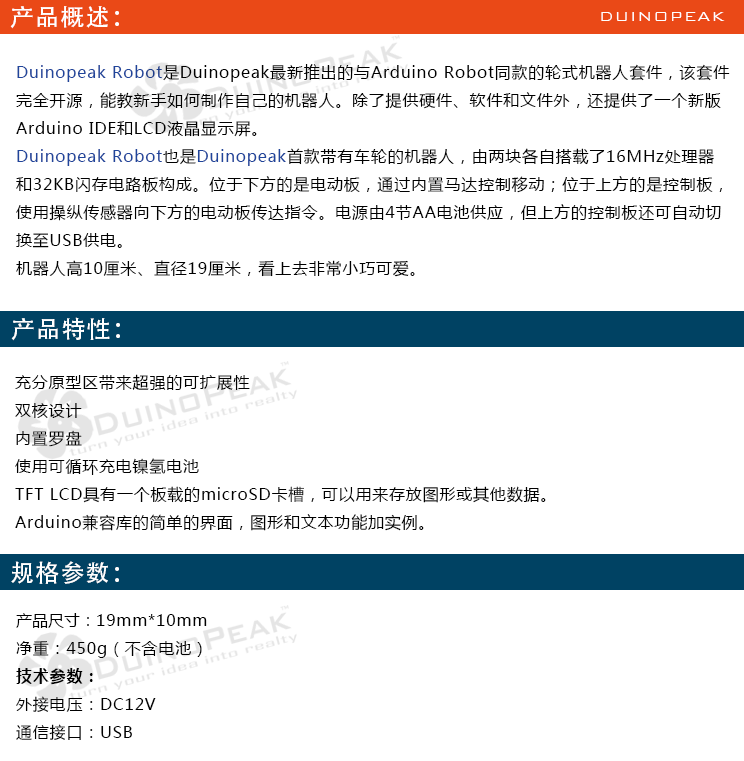
<style>
.page{position:relative;width:744px;height:761px;background:#ffffff}
.page>*{position:absolute;margin:0}
.t1{font:24px "AdobeHeitiStd-Regular";letter-spacing:0.05em;color:#ffffff}
.t2{font:18px "BankGothicBT-Light";letter-spacing:0.05em;color:#ffffff}
.t3{font:16px "MicrosoftYaHei";letter-spacing:0.05em;color:#000000}
.t4{font:16px "MicrosoftYaHei";letter-spacing:0.05em;color:#20459b}
.t5{font:16px "MicrosoftYaHei";color:#000000}
.t6{font:16px "MicrosoftYaHei-Bold";letter-spacing:0.05em;color:#000000}
</style>
<div class="page">
<p class="t1" style="left:10px;top:6px;width:109px;height:23px">产品概述：</p>
<p class="t2" style="left:601px;top:12px;width:124px;height:9px">DUINOPEAK</p>
<p class="t3" style="left:16px;top:64px;width:714px;height:213px"><span class="t4">Duinopeak Robot</span>是Duinopeak最新推出的与Arduino Robot同款的轮式机器人套件，该套件<br>完全开源，能教新手如何制作自己的机器人。除了提供硬件、软件和文件外，还提供了一个新版<br>Arduino IDE和LCD液晶显示屏。<br><span class="t4">Duinopeak Robot</span>也是<span class="t4">Duinopeak</span>首款带有车轮的机器人，由两块各自搭载了16MHz处理器<br>和32KB闪存电路板构成。位于下方的是电动板，通过内置马达控制移动；位于上方的是控制板，<br>使用操纵传感器向下方的电动板传达指令。电源由4节AA电池供应，但上方的控制板还可自动切<br>换至USB供电。<br>机器人高10厘米、直径19厘米，看上去非常小巧可爱。</p>
<p class="t1" style="left:11px;top:317px;width:109px;height:24px">产品特性：</p>
<p class="t3" style="left:15px;top:374px;width:531px;height:157px">充分原型区带来超强的可扩展性<br>双核设计<br>内置罗盘<br>使用可循环充电镍氢电池<br>TFT LCD具有一个板载的microSD卡槽，可以用来存放图形或其他数据。<br>Arduino兼容库的简单的界面，图形和文本功能加实例。</p>
<p class="t1" style="left:11px;top:561px;width:108px;height:23px">规格参数：</p>
<p class="t3" style="left:16px;top:613px;width:191px;height:127px"><span class="t5">产品尺寸：</span>19mm*10mm<br>净重：450g（不含电池）<br><span class="t6">技术参数：<br></span>外接电压：DC12V<br>通信接口：USB</p>
</div>
